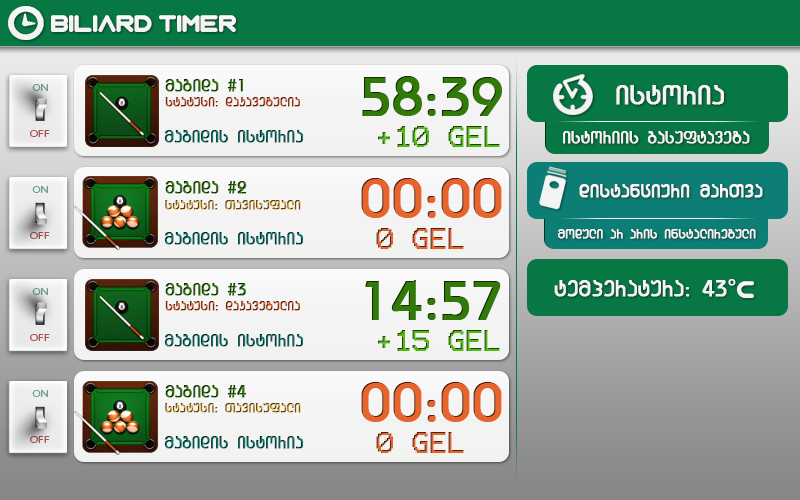
<style>
.page{position:relative;width:800px;height:500px}
.page>*{position:absolute;margin:0}
.t1{font:24px "Zian";color:#f4f4f4}
.t2{font:60px "GeoBauhausMtavr";color:#327a07;font-weight:bold}
.t3{font:10px "MyriadPro-Regular";color:#6d9e82;scale:1.2 1}
.t4{font:18px "GeoBauhausMtavr";font-weight:bold}
.t5{font:30px "GeoBauhausMtavr";color:#f4f4f4;font-weight:bold}
.t6{font:14px "GeoBauhausMtavr";font-weight:bold}
.t7{font:24px "Terminal"}
.t8{font:10px "MyriadPro-Regular";color:#aa5050;scale:1.2 1}
.t9{font:18px "GeoBauhausMtavr";color:#f4f4f4;font-weight:bold}
.t10{font:60px "GeoBauhausMtavr";color:#e6652d;font-weight:bold}
.t11{font:20px "GeoBauhausMtavr";color:#f4f4f4;font-weight:bold}
.t12{font:10px "MyriadPro-Regular";color:#6fa185;scale:1.2 1}
.t13{font:10px "MyriadPro-Regular";color:#a54d4d;scale:1.2 1}
.t14{font:14px "GeoBauhausMtavr";color:#f4f4f4;font-weight:bold}
.t15{font:24px "GeoBauhausMtavr";color:#f3f4f3;font-weight:bold}
.t16{font:24px "Zian";color:#f3f3f3}
</style>
<div class="page">
<p class="t1" style="left:51px;top:15px;width:185px;height:17px">BILIARD Timer</p>
<p class="t2" style="left:362px;top:76px;width:140px;height:40px">58:39</p>
<p class="t3" style="left:32px;top:84px;width:16px;height:7px">ON</p>
<p class="t4" style="left:165px;top:79px;width:78px;height:13px">magida #1</p>
<p class="t5" style="left:616px;top:85px;width:108px;height:20px">istoria</p>
<p class="t6" style="left:165px;top:97px;width:136px;height:10px">statusi: dakavebulia</p>
<p class="t7" style="left:378px;top:126px;width:122px;height:21px">+10 GEL</p>
<p class="t8" style="left:30px;top:130px;width:20px;height:7px">OFF</p>
<p class="t4" style="left:164px;top:130px;width:140px;height:13px">magidis istoria</p>
<p class="t9" style="left:563px;top:131px;width:187px;height:13px">istoriis gasuftaveba</p>
<p class="t4" style="left:165px;top:181px;width:82px;height:13px">magida #2</p>
<p class="t10" style="left:361px;top:178px;width:141px;height:40px">00:00</p>
<p class="t11" style="left:579px;top:184px;width:184px;height:14px">distanciuri marTva</p>
<p class="t12" style="left:32px;top:186px;width:16px;height:7px">ON</p>
<p class="t6" style="left:165px;top:200px;width:136px;height:10px">statusi: Tavisufali</p>
<p class="t13" style="left:30px;top:232px;width:20px;height:7px">OFF</p>
<p class="t4" style="left:164px;top:232px;width:140px;height:13px">magidis istoria</p>
<p class="t7" style="left:376px;top:228px;width:88px;height:21px">0 GEL</p>
<p class="t14" style="left:558px;top:229px;width:198px;height:10px">moduli ar aris instalirebuli</p>
<p class="t2" style="left:365px;top:280px;width:136px;height:40px">14:57</p>
<p class="t15" style="left:554px;top:280px;width:173px;height:17px">temperatura: 43</p>
<p class="t14" style="left:728px;top:279px;width:8px;height:7px">O</p>
<p class="t16" style="left:737px;top:281px;width:17px;height:17px">C</p>
<p class="t3" style="left:32px;top:288px;width:16px;height:7px">ON</p>
<p class="t4" style="left:165px;top:283px;width:81px;height:13px">magida #3</p>
<p class="t6" style="left:165px;top:301px;width:136px;height:10px">statusi: dakavebulia</p>
<p class="t8" style="left:30px;top:334px;width:20px;height:7px">OFF</p>
<p class="t4" style="left:164px;top:334px;width:140px;height:13px">magidis istoria</p>
<p class="t7" style="left:378px;top:330px;width:122px;height:21px">+15 GEL</p>
<p class="t12" style="left:32px;top:390px;width:16px;height:7px">ON</p>
<p class="t4" style="left:165px;top:385px;width:82px;height:13px">magida #4</p>
<p class="t10" style="left:361px;top:382px;width:141px;height:40px">00:00</p>
<p class="t6" style="left:165px;top:403px;width:136px;height:10px">statusi: Tavisufali</p>
<p class="t13" style="left:30px;top:436px;width:20px;height:7px">OFF</p>
<p class="t4" style="left:164px;top:436px;width:140px;height:13px">magidis istoria</p>
<p class="t7" style="left:376px;top:432px;width:88px;height:21px">0 GEL</p>
</div>
